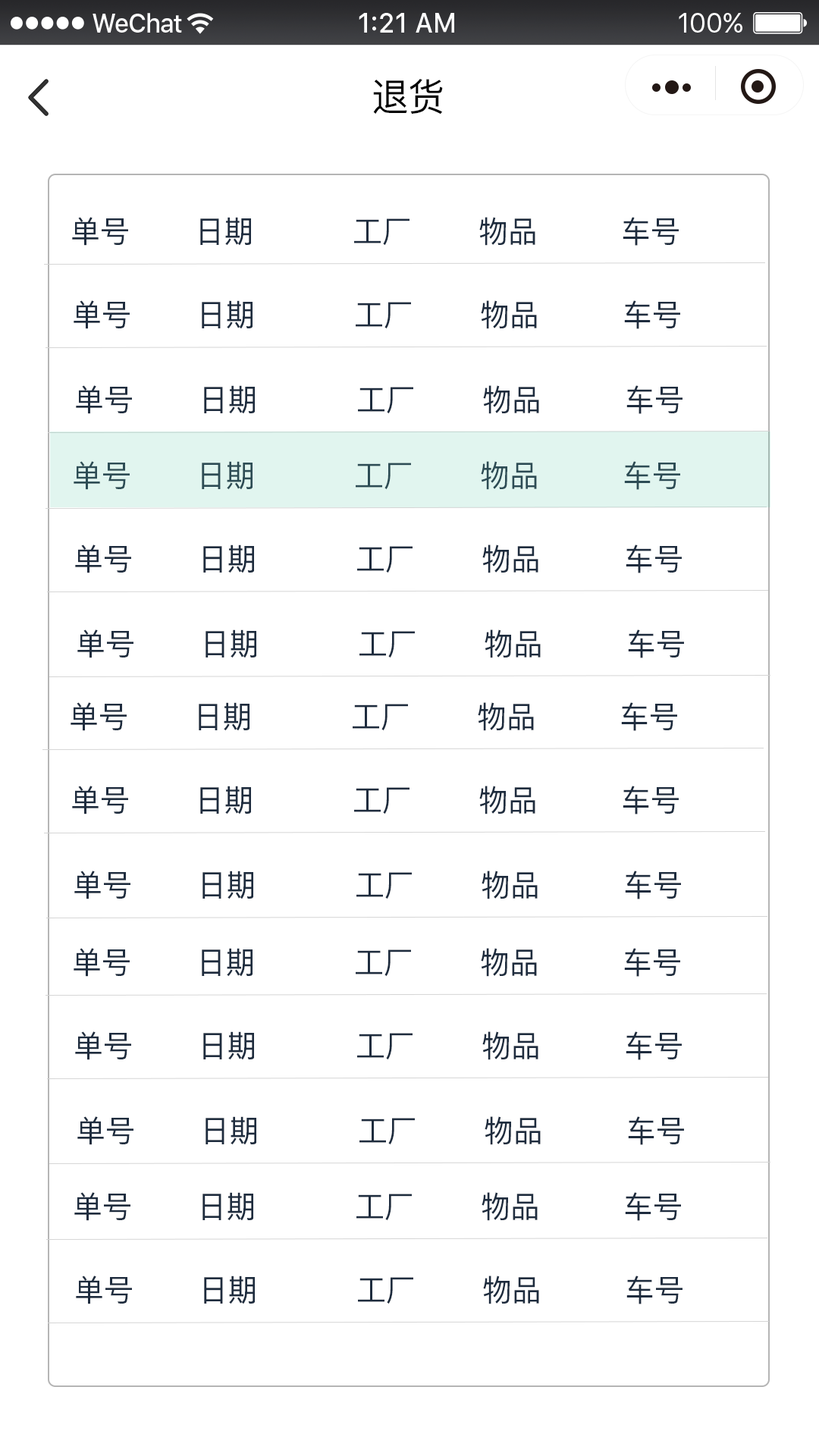
<style>
.page{position:relative;width:819px;height:1456px;background:#ffffff}
.page>*{position:absolute;margin:0}
.t1{font:37.9px "PingFangSC-Regular";color:#000000}
.t2{font:30.3px "PingFangSC-Regular";color:#1e2c3e}
.t3{font:30.3px "PingFangSC-Regular";color:#2d4c55}
</style>
<div class="page">
<p class="t1" style="left:373px;top:79px;width:70px;height:36px">退货</p>
<p class="t2" style="left:72px;top:217px;width:56px;height:29px">单号</p>
<p class="t2" style="left:200px;top:217px;width:51px;height:29px">日期</p>
<p class="t2" style="left:354px;top:218px;width:55px;height:28px">工厂</p>
<p class="t2" style="left:479px;top:217px;width:56px;height:29px">物品</p>
<p class="t2" style="left:623px;top:217px;width:56px;height:29px">车号</p>
<p class="t2" style="left:74px;top:300px;width:56px;height:29px">单号</p>
<p class="t2" style="left:202px;top:300px;width:51px;height:29px">日期</p>
<p class="t2" style="left:356px;top:302px;width:55px;height:27px">工厂</p>
<p class="t2" style="left:481px;top:300px;width:56px;height:29px">物品</p>
<p class="t2" style="left:624px;top:300px;width:56px;height:29px">车号</p>
<p class="t2" style="left:76px;top:385px;width:56px;height:29px">单号</p>
<p class="t2" style="left:204px;top:385px;width:51px;height:29px">日期</p>
<p class="t2" style="left:358px;top:387px;width:55px;height:27px">工厂</p>
<p class="t2" style="left:483px;top:385px;width:56px;height:29px">物品</p>
<p class="t2" style="left:626px;top:385px;width:56px;height:29px">车号</p>
<p class="t3" style="left:74px;top:461px;width:56px;height:29px">单号</p>
<p class="t3" style="left:202px;top:461px;width:51px;height:29px">日期</p>
<p class="t3" style="left:481px;top:461px;width:56px;height:29px">物品</p>
<p class="t3" style="left:624px;top:461px;width:56px;height:29px">车号</p>
<p class="t3" style="left:356px;top:463px;width:55px;height:27px">工厂</p>
<p class="t2" style="left:75px;top:544px;width:56px;height:29px">单号</p>
<p class="t2" style="left:203px;top:544px;width:51px;height:29px">日期</p>
<p class="t2" style="left:357px;top:546px;width:56px;height:27px">工厂</p>
<p class="t2" style="left:482px;top:544px;width:56px;height:29px">物品</p>
<p class="t2" style="left:626px;top:544px;width:56px;height:29px">车号</p>
<p class="t2" style="left:77px;top:629px;width:56px;height:29px">单号</p>
<p class="t2" style="left:206px;top:629px;width:50px;height:29px">日期</p>
<p class="t2" style="left:485px;top:629px;width:56px;height:29px">物品</p>
<p class="t2" style="left:628px;top:629px;width:56px;height:29px">车号</p>
<p class="t2" style="left:359px;top:631px;width:56px;height:27px">工厂</p>
<p class="t2" style="left:71px;top:702px;width:56px;height:29px">单号</p>
<p class="t2" style="left:199px;top:702px;width:50px;height:29px">日期</p>
<p class="t2" style="left:353px;top:704px;width:55px;height:27px">工厂</p>
<p class="t2" style="left:478px;top:702px;width:56px;height:29px">物品</p>
<p class="t2" style="left:621px;top:702px;width:56px;height:29px">车号</p>
<p class="t2" style="left:72px;top:786px;width:56px;height:28px">单号</p>
<p class="t2" style="left:200px;top:786px;width:51px;height:28px">日期</p>
<p class="t2" style="left:479px;top:786px;width:56px;height:28px">物品</p>
<p class="t2" style="left:623px;top:786px;width:56px;height:28px">车号</p>
<p class="t2" style="left:354px;top:787px;width:55px;height:27px">工厂</p>
<p class="t2" style="left:74px;top:871px;width:56px;height:28px">单号</p>
<p class="t2" style="left:202px;top:871px;width:51px;height:28px">日期</p>
<p class="t2" style="left:356px;top:872px;width:56px;height:27px">工厂</p>
<p class="t2" style="left:482px;top:871px;width:56px;height:28px">物品</p>
<p class="t2" style="left:625px;top:871px;width:56px;height:28px">车号</p>
<p class="t2" style="left:74px;top:948px;width:56px;height:29px">单号</p>
<p class="t2" style="left:202px;top:948px;width:51px;height:29px">日期</p>
<p class="t2" style="left:356px;top:949px;width:55px;height:28px">工厂</p>
<p class="t2" style="left:481px;top:948px;width:56px;height:29px">物品</p>
<p class="t2" style="left:624px;top:948px;width:56px;height:29px">车号</p>
<p class="t2" style="left:75px;top:1031px;width:56px;height:29px">单号</p>
<p class="t2" style="left:203px;top:1031px;width:51px;height:29px">日期</p>
<p class="t2" style="left:357px;top:1033px;width:56px;height:27px">工厂</p>
<p class="t2" style="left:482px;top:1031px;width:56px;height:29px">物品</p>
<p class="t2" style="left:626px;top:1031px;width:56px;height:29px">车号</p>
<p class="t2" style="left:77px;top:1116px;width:56px;height:29px">单号</p>
<p class="t2" style="left:206px;top:1116px;width:50px;height:29px">日期</p>
<p class="t2" style="left:359px;top:1118px;width:56px;height:27px">工厂</p>
<p class="t2" style="left:485px;top:1116px;width:56px;height:29px">物品</p>
<p class="t2" style="left:628px;top:1116px;width:56px;height:29px">车号</p>
<p class="t2" style="left:74px;top:1192px;width:56px;height:29px">单号</p>
<p class="t2" style="left:202px;top:1192px;width:51px;height:29px">日期</p>
<p class="t2" style="left:356px;top:1194px;width:56px;height:27px">工厂</p>
<p class="t2" style="left:482px;top:1192px;width:56px;height:29px">物品</p>
<p class="t2" style="left:625px;top:1192px;width:56px;height:29px">车号</p>
<p class="t2" style="left:76px;top:1275px;width:56px;height:29px">单号</p>
<p class="t2" style="left:204px;top:1275px;width:51px;height:29px">日期</p>
<p class="t2" style="left:358px;top:1277px;width:55px;height:27px">工厂</p>
<p class="t2" style="left:483px;top:1275px;width:56px;height:29px">物品</p>
<p class="t2" style="left:626px;top:1275px;width:56px;height:29px">车号</p>
</div>
